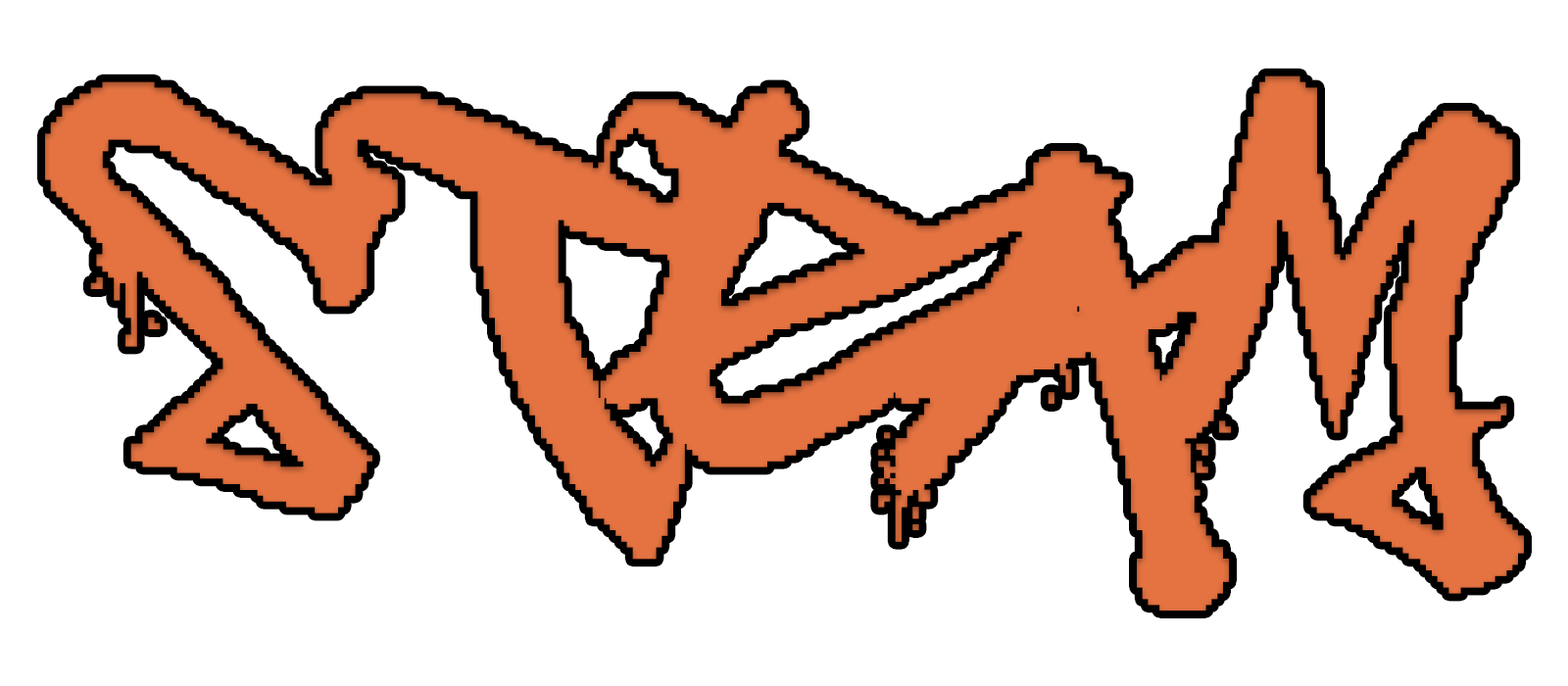
<style>
.page{position:relative;width:1568px;height:686px;background:#ffffff}
.page>*{position:absolute;margin:0}
.t1{font:735px "Digitag";color:#e57341}
</style>
<div class="page">
<p class="t1" style="left:45px;top:75px;width:1479px;height:536px">Steam</p>
</div>
